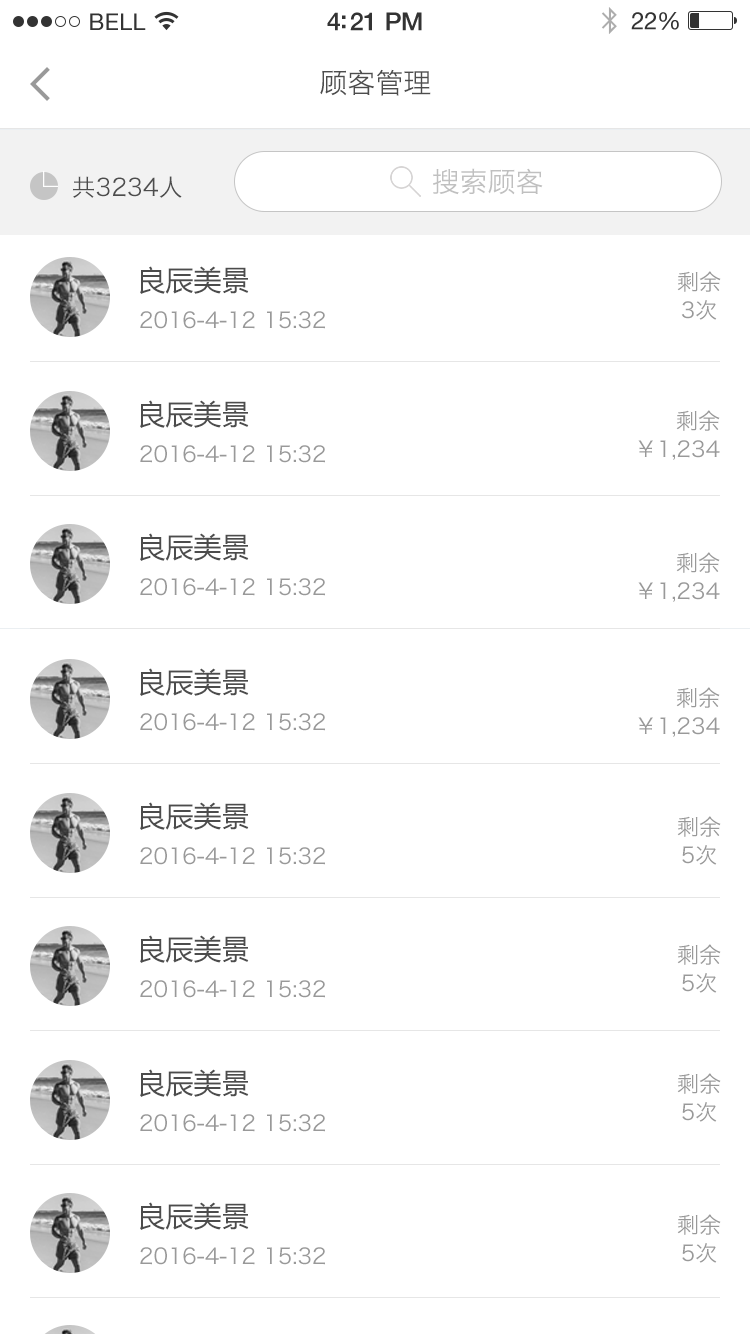
<style>
.page{position:relative;width:750px;height:1334px;background:#ffffff}
.page>*{position:absolute;margin:0}
.t1{font:28px "HiraginoSansGB-W3";color:#4d4d4d}
.t2{font:28px "HiraginoSansGB-W3";color:#c0c0c0}
.t3{font:24px "HiraginoSansGB-W3";color:#4d4d4d}
.t4{font:28px "MicrosoftYaHei";color:#4c4c4c}
.t5{font:22px/28px "HiraginoSansGB-W3";color:#999999}
.t6{font:22px "HiraginoSansGB-W3";color:#999999}
</style>
<div class="page">
<p class="t1" style="left:320px;top:69px;width:111px;height:27px">顾客管理</p>
<p class="t2" style="left:433px;top:168px;width:110px;height:27px">搜索顾客</p>
<p class="t3" style="left:73px;top:176px;width:109px;height:22px">共3234人</p>
<p class="t4" style="left:140px;top:266px;width:109px;height:28px">良辰美景</p>
<p class="t5" style="left:677px;top:271px;width:44px;height:49px;text-align:center">剩余<br>3次</p>
<p class="t6" style="left:140px;top:311px;width:185px;height:18px">2016-4-12 15:32</p>
<p class="t4" style="left:140px;top:400px;width:109px;height:28px">良辰美景</p>
<p class="t5" style="left:638px;top:410px;width:82px;height:50px;text-align:right">剩余<br>￥1,234</p>
<p class="t6" style="left:140px;top:445px;width:185px;height:18px">2016-4-12 15:32</p>
<p class="t4" style="left:140px;top:533px;width:109px;height:28px">良辰美景</p>
<p class="t5" style="left:638px;top:552px;width:82px;height:50px;text-align:right">剩余<br>￥1,234</p>
<p class="t6" style="left:140px;top:578px;width:185px;height:18px">2016-4-12 15:32</p>
<p class="t4" style="left:140px;top:668px;width:109px;height:28px">良辰美景</p>
<p class="t5" style="left:638px;top:687px;width:82px;height:50px;text-align:right">剩余<br>￥1,234</p>
<p class="t6" style="left:140px;top:713px;width:185px;height:18px">2016-4-12 15:32</p>
<p class="t4" style="left:140px;top:802px;width:109px;height:28px">良辰美景</p>
<p class="t5" style="left:677px;top:816px;width:44px;height:49px;text-align:center">剩余<br>5次</p>
<p class="t6" style="left:140px;top:847px;width:185px;height:18px">2016-4-12 15:32</p>
<p class="t4" style="left:140px;top:935px;width:109px;height:28px">良辰美景</p>
<p class="t5" style="left:677px;top:944px;width:44px;height:49px;text-align:center">剩余<br>5次</p>
<p class="t6" style="left:140px;top:980px;width:185px;height:18px">2016-4-12 15:32</p>
<p class="t4" style="left:140px;top:1069px;width:109px;height:28px">良辰美景</p>
<p class="t5" style="left:677px;top:1073px;width:44px;height:49px;text-align:center">剩余<br>5次</p>
<p class="t6" style="left:140px;top:1114px;width:185px;height:18px">2016-4-12 15:32</p>
<p class="t4" style="left:140px;top:1202px;width:109px;height:28px">良辰美景</p>
<p class="t5" style="left:677px;top:1214px;width:44px;height:49px;text-align:center">剩余<br>5次</p>
<p class="t6" style="left:140px;top:1247px;width:185px;height:18px">2016-4-12 15:32</p>
</div>
